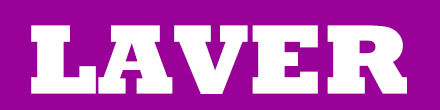
<style>
.page{position:relative;width:440px;height:110px;background:#980098}
.page>*{position:absolute;margin:0}
.t1{font:100px "Rockwell-ExtraBold";color:#ffffff}
</style>
<div class="page">
<p class="t1" style="left:31px;top:25px;width:376px;height:69px">LAVER</p>
</div>
